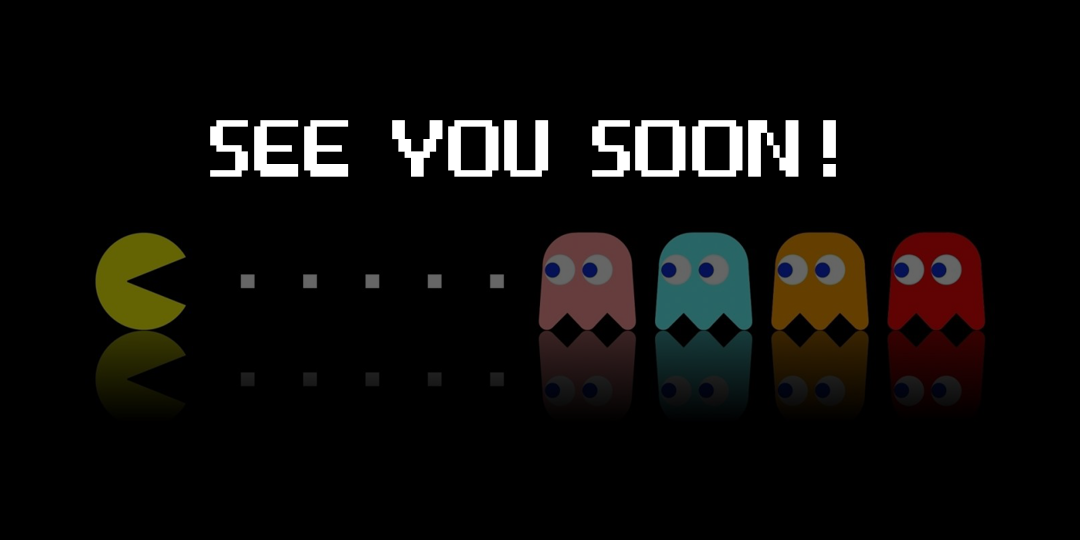
<style>
.page{position:relative;width:1080px;height:540px;background:#000000}
.page>*{position:absolute;margin:0}
.t1{font:200px "Game-Over";color:#ffffff}
</style>
<div class="page">
<p class="t1" style="left:210px;top:120px;width:626px;height:57px">SEE  YOU  SOON !</p>
</div>
